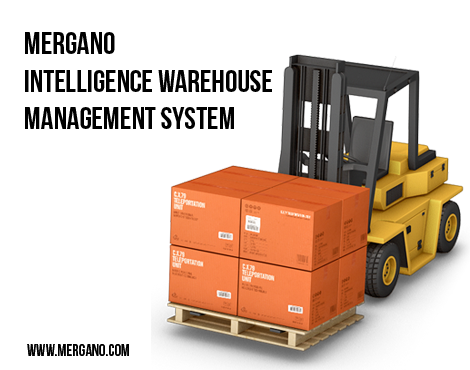
<style>
.page{position:relative;width:470px;height:370px;background:#ffffff}
.page>*{position:absolute;margin:0}
.t1{font:31.1px "BebasNeueBold";color:#000000}
.t2{font:16.5px "BebasNeueBold";color:#000000}
</style>
<div class="page">
<p class="t1" style="left:25px;top:32px;width:247px;height:97px">MERGANO <br>INTELLIGENCE WAREHOUSE <br>MANAGEMENT SYSTEM</p>
<p class="t2" style="left:27px;top:344px;width:102px;height:12px">WWW.MERGANO.COM</p>
</div>
